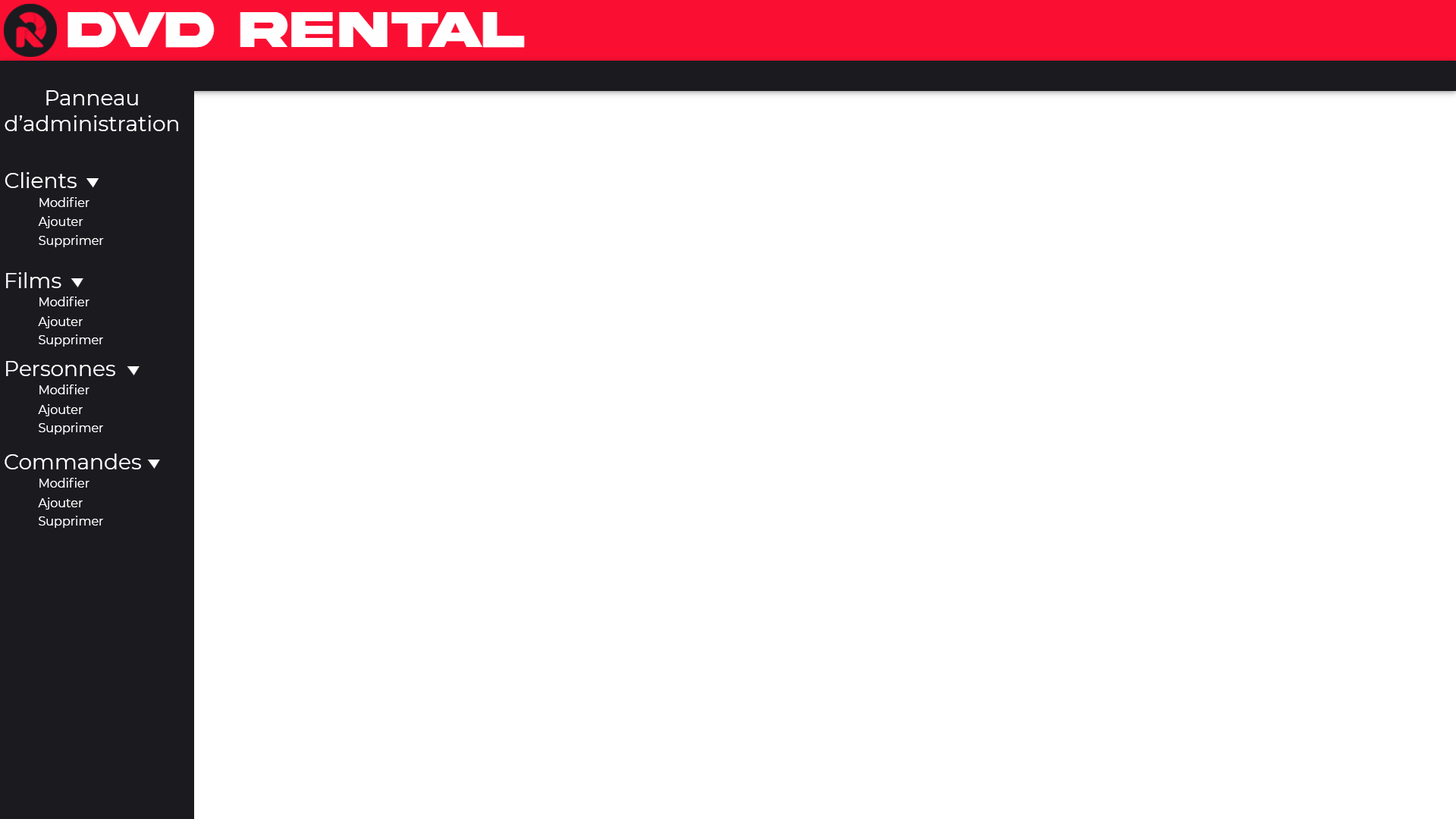
<style>
.page{position:relative;width:1456px;height:819px;background:#ffffff}
.page>*{position:absolute;margin:0}
.t1{font:21.2px "Montserrat-Regular";color:#ffffff}
.t2{font:12.1px "Montserrat-Regular";color:#ffffff}
</style>
<div class="page">
<p class="t1" style="left:5px;top:90px;width:173px;height:41px;text-align:center">Panneau d’administration</p>
<p class="t1" style="left:5px;top:172px;width:72px;height:16px">Clients</p>
<p class="t2" style="left:39px;top:197px;width:50px;height:10px">Modifier</p>
<p class="t2" style="left:38px;top:216px;width:45px;height:12px">Ajouter</p>
<p class="t2" style="left:39px;top:235px;width:65px;height:12px">Supprimer</p>
<p class="t1" style="left:6px;top:272px;width:55px;height:16px">Films</p>
<p class="t2" style="left:39px;top:297px;width:50px;height:9px">Modifier</p>
<p class="t2" style="left:38px;top:316px;width:45px;height:12px">Ajouter</p>
<p class="t2" style="left:39px;top:334px;width:64px;height:13px">Supprimer</p>
<p class="t1" style="left:6px;top:361px;width:109px;height:15px">Personnes</p>
<p class="t2" style="left:39px;top:384px;width:50px;height:10px">Modifier</p>
<p class="t2" style="left:38px;top:404px;width:45px;height:12px">Ajouter</p>
<p class="t2" style="left:39px;top:422px;width:64px;height:13px">Supprimer</p>
<p class="t1" style="left:5px;top:453px;width:136px;height:16px">Commandes</p>
<p class="t2" style="left:39px;top:478px;width:50px;height:10px">Modifier</p>
<p class="t2" style="left:38px;top:497px;width:45px;height:13px">Ajouter</p>
<p class="t2" style="left:39px;top:516px;width:64px;height:12px">Supprimer</p>
</div>
